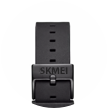
<style>
.page{position:relative;width:108px;height:108px;background:#fefefe}
.page>*{position:absolute;margin:0}
.t1{font:10px "MyriadPro-Bold";color:#262526}
</style>
<div class="page">
<p class="t1" style="left:40px;top:67px;width:28px;height:7px">SKMEI</p>
</div>
